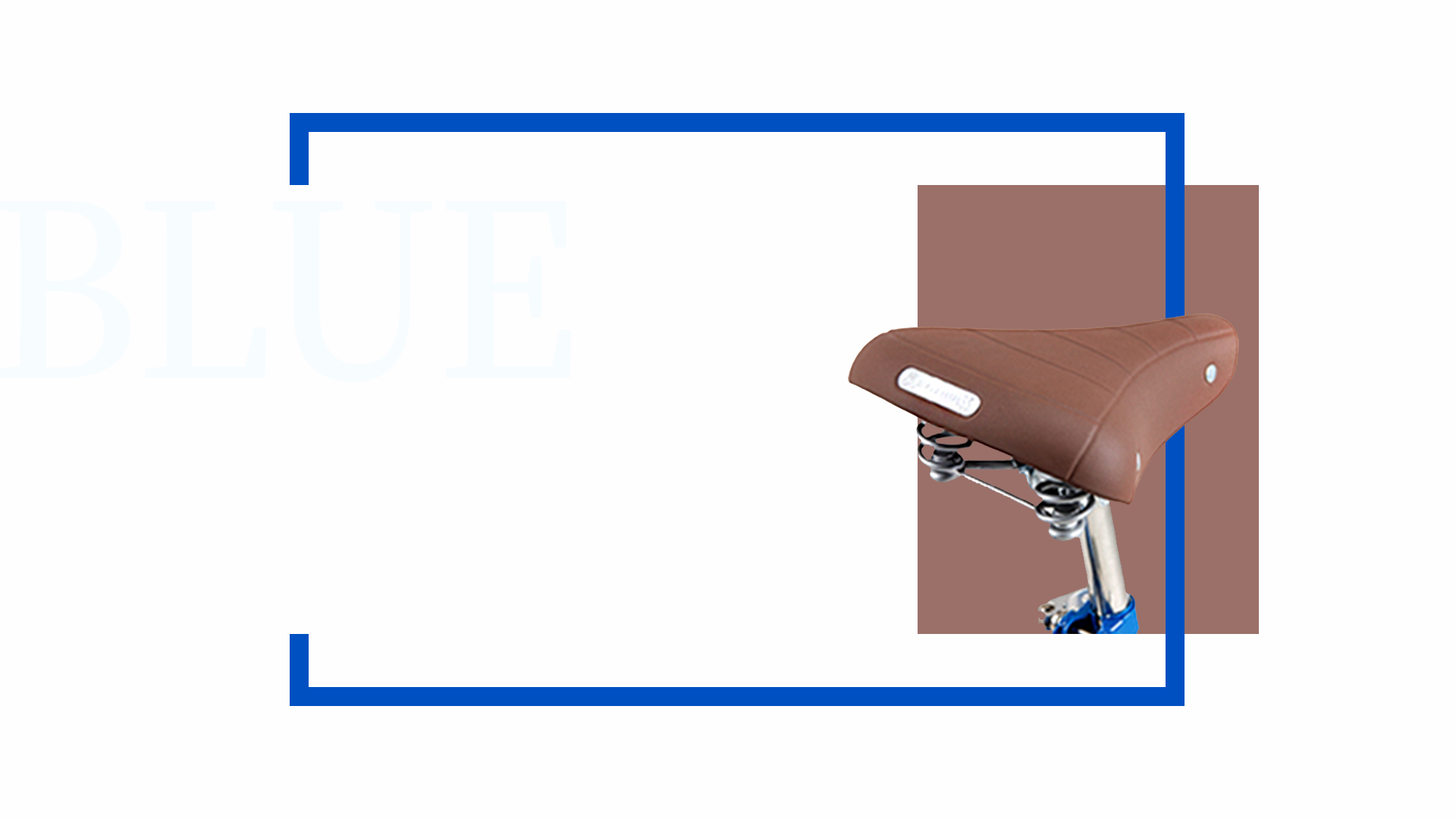
<style>
.page{position:relative;width:1456px;height:819px;background:#fefeff}
.page>*{position:absolute;margin:0}
.t1{font:239.3px "NotoSerifCJKkr-SemiBold";color:#f7fcff;text-transform:uppercase;scale:0.91 1}
</style>
<div class="page">
<p class="t1" style="left:0px;top:201px;width:571px;height:181px">blue</p>
</div>
